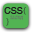
<style>
.page{position:relative;width:32px;height:32px;background:#52b453}
.page>*{position:absolute;margin:0}
.t1{font:9px "Helvetica";color:#1e1e1e}
.t2{font:2px "Helvetica";color:#618262}
.t3{font:8px "Helvetica";color:#3a5e3a}
.t4{font:8px "Helvetica";color:#375e38}
</style>
<div class="page">
<p class="t1" style="left:4px;top:7px;width:19px;height:7px">CSS</p>
<p class="t2" style="left:10px;top:15px;width:13px;height:5px">dfjhfj: fdjghjhg<br>dsdsds: fdfgfg</p>
<p class="t3" style="left:23px;top:7px;width:3px;height:8px">{</p>
<p class="t4" style="left:6px;top:18px;width:3px;height:8px">}</p>
</div>
